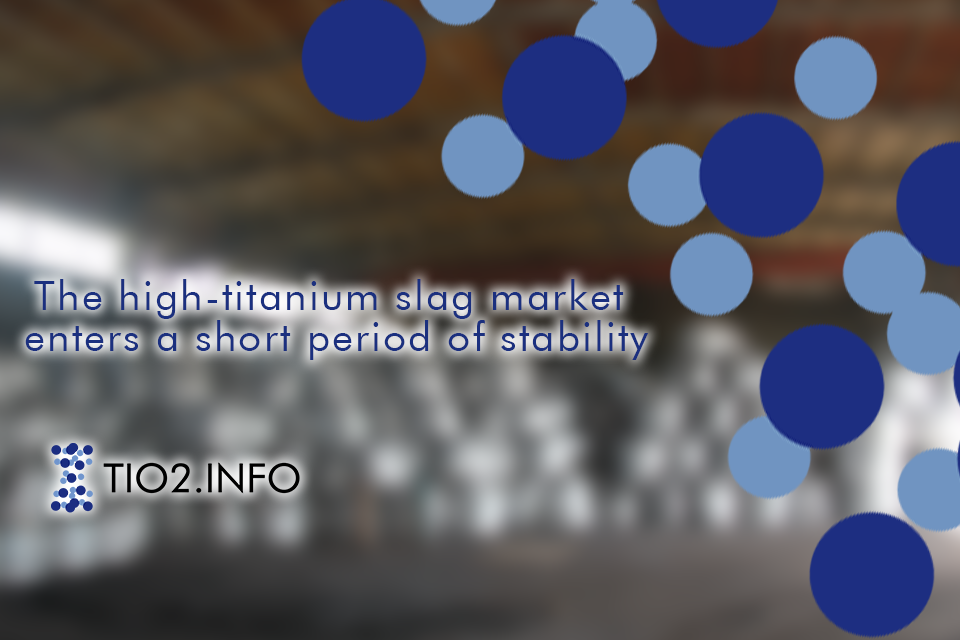
<style>
.page{position:relative;width:960px;height:640px}
.page>*{position:absolute;margin:0}
.t1{font:40.7px/40.7px "FuturaBT-Book";letter-spacing:0.05em;color:#1b307f}
</style>
<div class="page">
<p class="t1" style="left:25px;top:279px;width:624px;height:81px;text-align:center">The high-titanium slag market <br>enters a short period of stability</p>
</div>
